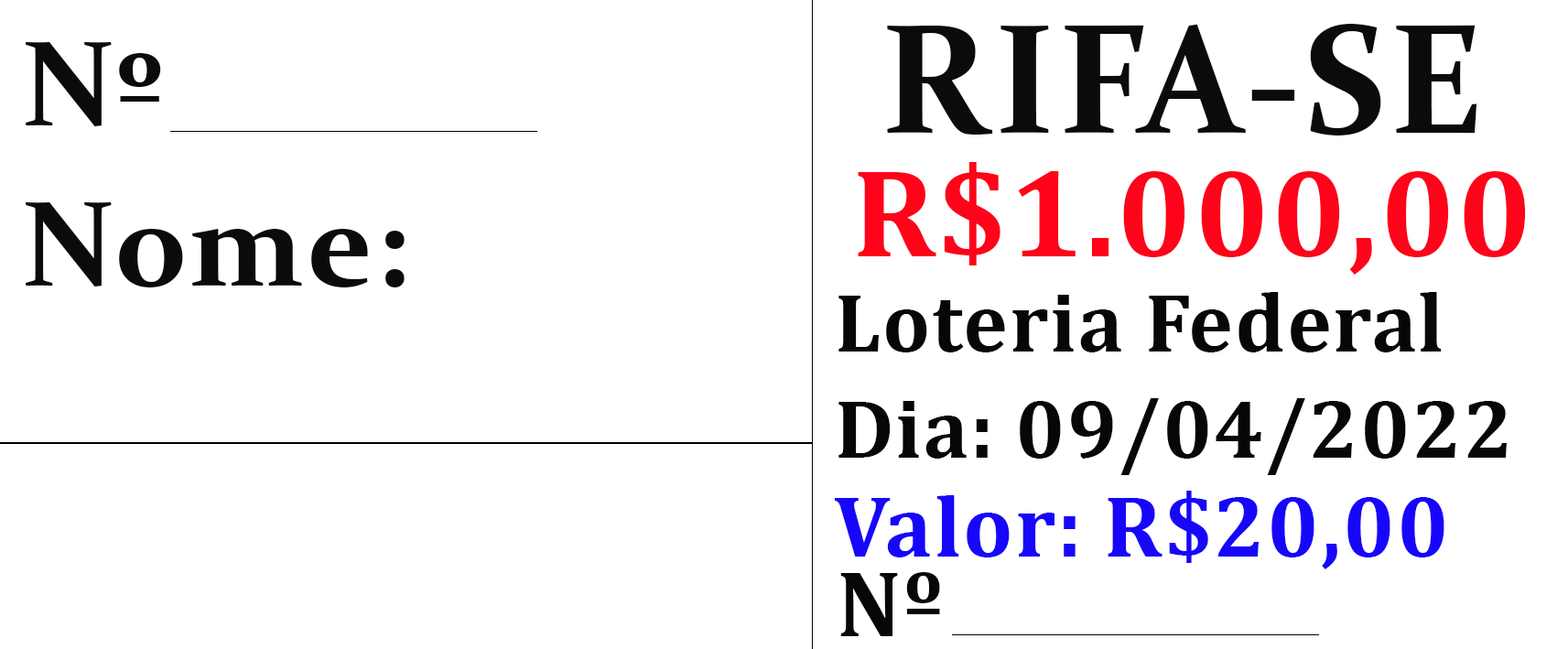
<style>
.page{position:relative;width:1568px;height:649px;background:#ffffff}
.page>*{position:absolute;margin:0}
.t1{font:156.4px "Constantia-Bold";letter-spacing:0.02em;color:#0c0b0b}
.t2{font:122px/160.2px "Constantia-Bold";letter-spacing:0.02em;color:#0c0b0b}
.t3{font:125.9px "Cambria-Bold";letter-spacing:0.02em;color:#fe0319}
.t4{font:83.9px/106.8px "Cambria-Bold";letter-spacing:0.02em;color:#070707}
.t5{font:87.7px "Cambria-Bold";letter-spacing:0.02em;color:#1706fa}
.t6{font:95.3px "Cambria-Bold";letter-spacing:0.02em;color:#070707}
</style>
<div class="page">
<p class="t1" style="left:887px;top:24px;width:590px;height:111px">RIFA-SE</p>
<p class="t2" style="left:26px;top:42px;width:379px;height:245px">Nº<br>Nome:</p>
<p class="t3" style="left:858px;top:162px;width:668px;height:113px">R$1.000,00</p>
<p class="t4" style="left:838px;top:292px;width:669px;height:183px">Loteria Federal<br>Dia: 09/04/2022</p>
<p class="t5" style="left:835px;top:491px;width:609px;height:78px">Valor: R$20,00</p>
<p class="t6" style="left:840px;top:572px;width:100px;height:64px">Nº</p>
</div>
